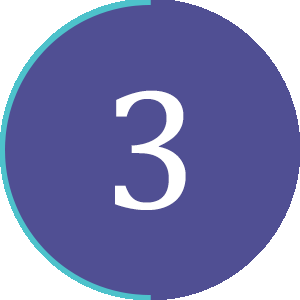
<style>
.page{position:relative;width:300px;height:300px;background:#504f93}
.page>*{position:absolute;margin:0}
.t1{font:175px "CambriaMath";color:#ffffff;text-transform:uppercase}
</style>
<div class="page">
<p class="t1" style="left:115px;top:90px;width:71px;height:120px">3</p>
</div>
